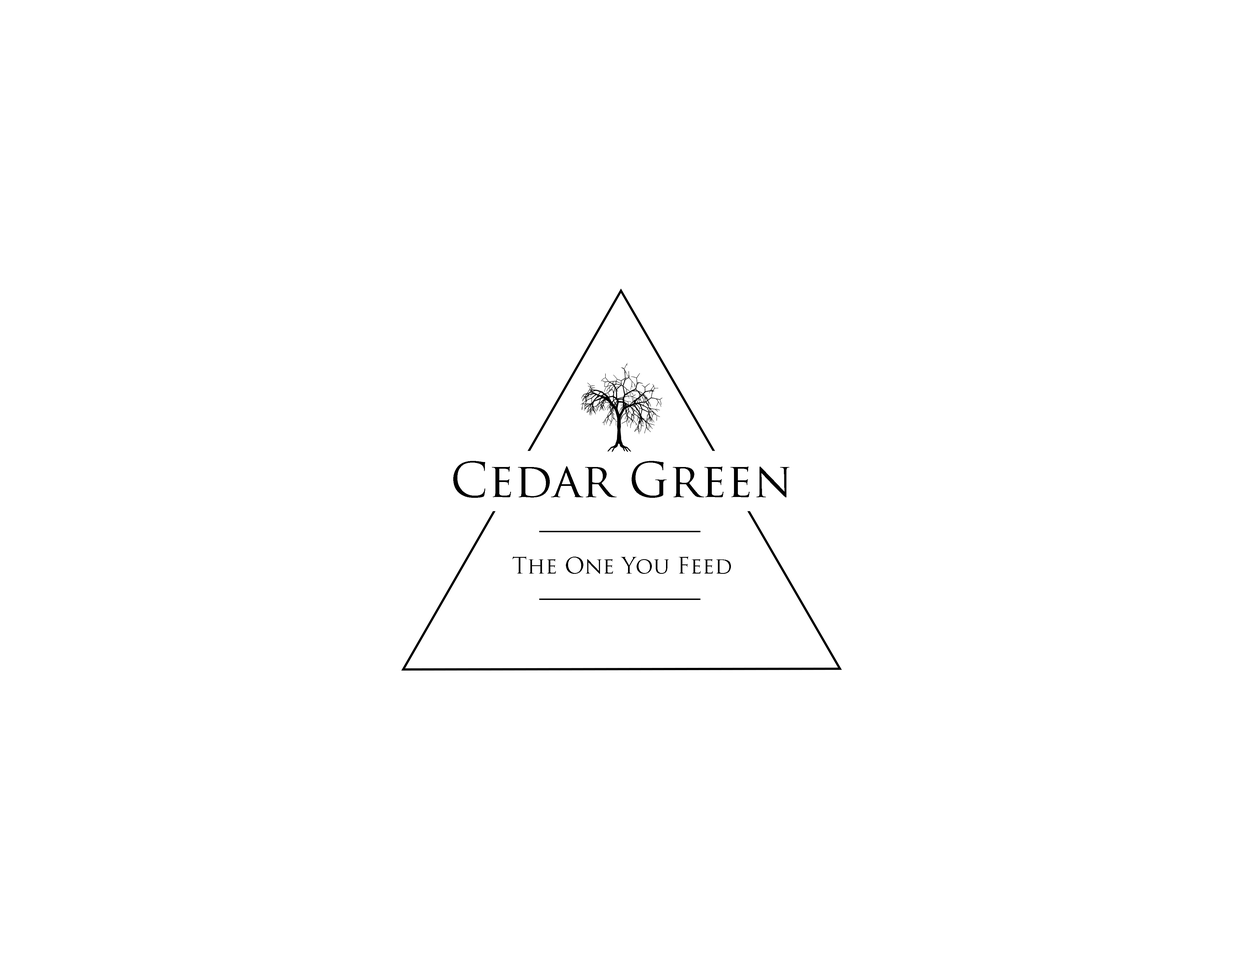
<style>
.page{position:relative;width:1243px;height:959px;background:#ffffff}
.page>*{position:absolute;margin:0}
.t1{font:47.2px "TrajanPro-Regular";color:#000000}
.t2{font:22.2px "TrajanPro-Regular";color:#000000}
</style>
<div class="page">
<p class="t1" style="left:453px;top:461px;width:337px;height:37px">Cedar Green</p>
<p class="t2" style="left:513px;top:557px;width:218px;height:17px">The One You Feed</p>
</div>
